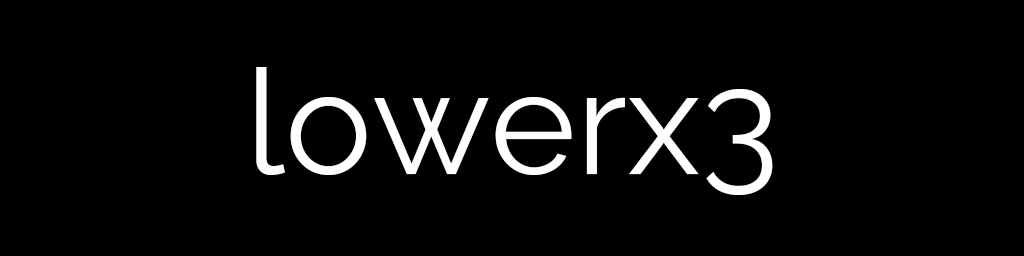
<style>
.page{position:relative;width:1024px;height:256px;background:#000000}
.page>*{position:absolute;margin:0}
.t1{font:145.8px "RalewayRoman-Regular";color:#ffffff}
</style>
<div class="page">
<p class="t1" style="left:256px;top:67px;width:517px;height:128px">lowerx3</p>
</div>
